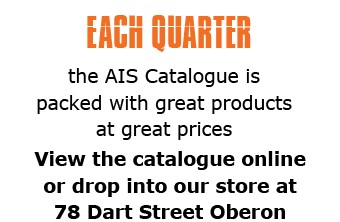
<style>
.page{position:relative;width:340px;height:222px;background:#ffffff}
.page>*{position:absolute;margin:0}
.t1{font:40px "Impossible";color:#f26e23}
.t2{font:18.7px/26.7px "Verdana";color:#000000}
.t3{font:18.7px/26.7px "Verdana-Bold";color:#000000}
</style>
<div class="page">
<p class="t1" style="left:87px;top:15px;width:164px;height:37px">EACH QUARTER</p>
<p class="t2" style="left:37px;top:68px;width:255px;height:72px;text-align:center">the AIS Catalogue is<br>packed with great products<br>at great prices</p>
<p class="t3" style="left:34px;top:151px;width:272px;height:68px;text-align:center">View the catalogue online<br>or drop into our store at<br>78 Dart Street Oberon</p>
</div>
